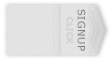
<style>
.page{position:relative;width:110px;height:60px}
.page>*{position:absolute;margin:0}
.t1{font:8px "Verdana";letter-spacing:0.04em}
.t2{font:10px "Verdana";letter-spacing:0.04em;color:#848384}
</style>
<div class="page">
<p class="t1" style="left:66px;top:17px;width:7px;height:27px;rotate:90deg">CLICK</p>
<p class="t2" style="left:77px;top:9px;width:9px;height:42px;rotate:90deg">SIGNUP</p>
<p class="t2" style="left:77px;top:9px;width:9px;height:42px;rotate:90deg">SIGNUP</p>
</div>
